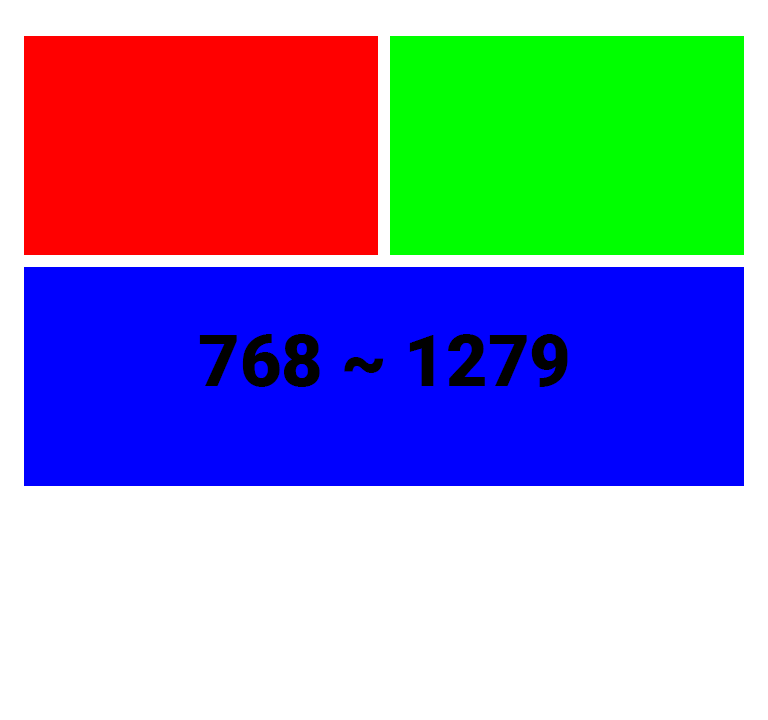
<style>
.page{position:relative;width:768px;height:720px;background:#ffffff}
.page>*{position:absolute;margin:0}
.t1{font:72px "Roboto-Black";color:#000000}
</style>
<div class="page">
<p class="t1" style="left:199px;top:334px;width:369px;height:53px">768 ~ 1279</p>
</div>
